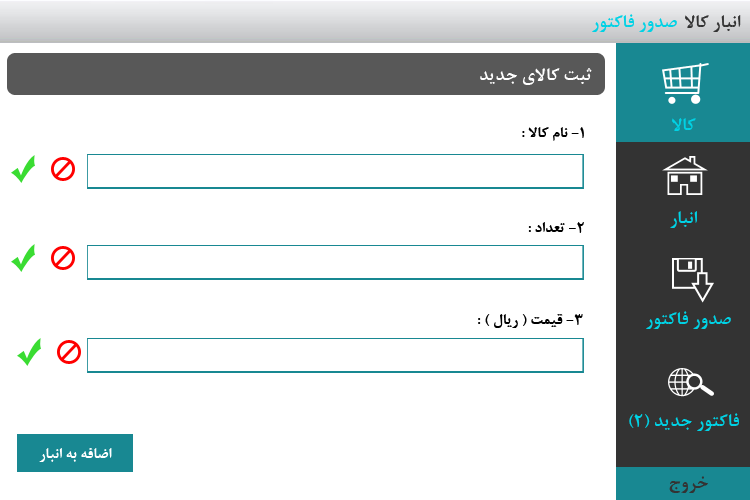
<style>
.page{position:relative;width:750px;height:500px;background:#ffffff}
.page>*{position:absolute;margin:0}
.t1{font:20px "BNazaninBold";color:#00d2e5}
.t2{font:20px "BNazaninBold";color:#333333}
.t3{font:20px "BNazaninBold";color:#ffffff}
.t4{font:16.7px "BNazaninBold";color:#000000}
.t5{font:16.7px "BNazaninBold";color:#ffffff}
</style>
<div class="page">
<p class="t1" style="left:592px;top:14px;width:85px;height:18px">صدور فاکتور</p>
<p class="t2" style="left:685px;top:15px;width:56px;height:17px">انبار کالا</p>
<p class="t3" style="left:480px;top:68px;width:112px;height:17px">ثبت کالای جدید</p>
<p class="t1" style="left:672px;top:118px;width:24px;height:13px">کالا</p>
<p class="t4" style="left:522px;top:127px;width:62px;height:14px">1- نام کالا :</p>
<p class="t4" style="left:528px;top:222px;width:56px;height:11px">2- تعداد :</p>
<p class="t1" style="left:670px;top:211px;width:27px;height:17px">انبار</p>
<p class="t4" style="left:478px;top:314px;width:105px;height:14px">3- قیمت ( ریال ) :</p>
<p class="t1" style="left:646px;top:311px;width:85px;height:18px">صدور فاکتور</p>
<p class="t1" style="left:629px;top:413px;width:110px;height:18px">فاکتور جدید (2)</p>
<p class="t5" style="left:39px;top:448px;width:73px;height:14px">اضافه به انبار</p>
<p class="t2" style="left:669px;top:476px;width:39px;height:17px">خروج</p>
</div>
